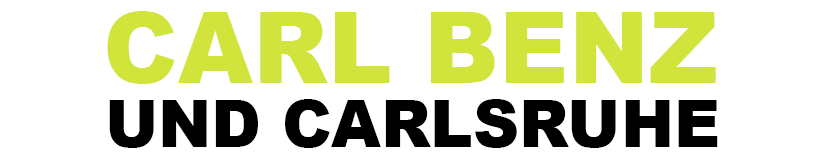
<style>
.page{position:relative;width:822px;height:161px;background:#ffffff}
.page>*{position:absolute;margin:0}
.t1{font:99.4px "Arial-Black";color:#d1e43b}
.t2{font:65.7px "Arial-Black";color:#000000}
</style>
<div class="page">
<p class="t1" style="left:107px;top:11px;width:609px;height:73px">CARL BENZ</p>
<p class="t2" style="left:109px;top:99px;width:609px;height:49px">UND CARLSRUHE</p>
</div>
